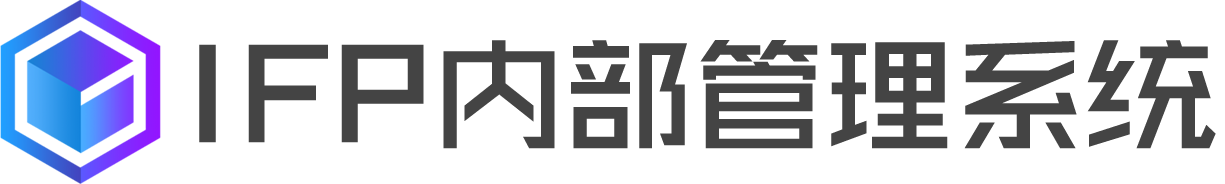
<style>
.page{position:relative;width:1225px;height:184px;background:#ffffff}
.page>*{position:absolute;margin:0}
.t1{font:133.5px "REEJI-BigYoung-BoldGB2.0";letter-spacing:-0.025em;color:#444444}
</style>
<div class="page">
<p class="t1" style="left:199px;top:40px;width:1017px;height:109px">IFP内部管理系统</p>
</div>
